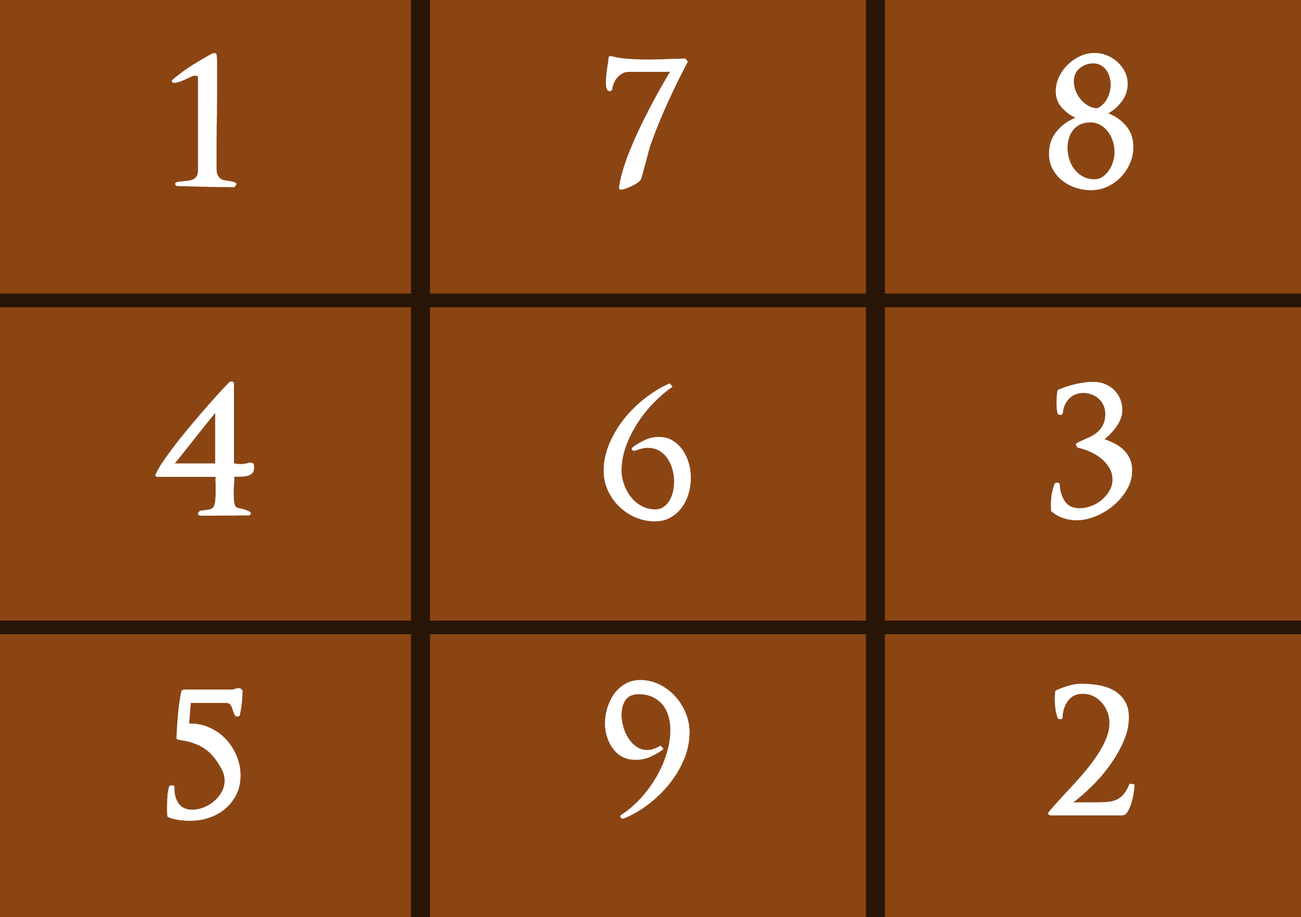
<style>
.page{position:relative;width:1301px;height:917px;background:#8b4513}
.page>*{position:absolute;margin:0}
.t1{font:218.5px "OptimusPrincepsSemiBold";color:#ffffff}
.t2{font:218.6px "OptimusPrincepsSemiBold";color:#ffffff}
</style>
<div class="page">
<p class="t1" style="left:172px;top:53px;width:65px;height:134px">1</p>
<p class="t1" style="left:1048px;top:53px;width:85px;height:137px">8</p>
<p class="t1" style="left:606px;top:56px;width:82px;height:134px">7</p>
<p class="t2" style="left:155px;top:381px;width:99px;height:135px">4</p>
<p class="t2" style="left:603px;top:383px;width:88px;height:138px">6</p>
<p class="t2" style="left:1051px;top:382px;width:81px;height:138px">3</p>
<p class="t2" style="left:167px;top:688px;width:76px;height:133px">5</p>
<p class="t2" style="left:605px;top:680px;width:85px;height:139px">9</p>
<p class="t2" style="left:1048px;top:683px;width:86px;height:133px">2</p>
</div>
